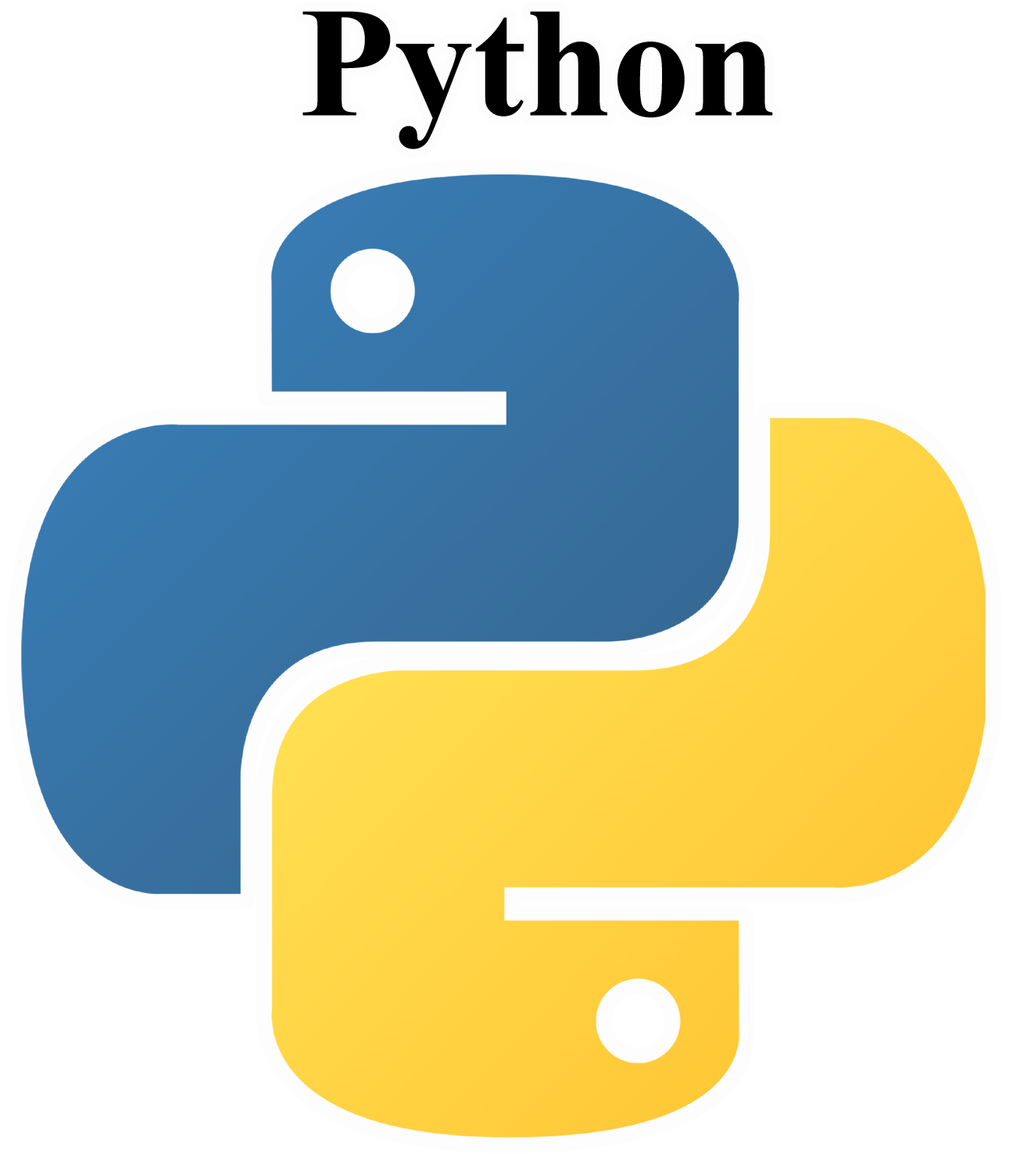
<style>
.page{position:relative;width:1020px;height:1169px;background:#ffffff}
.page>*{position:absolute;margin:0}
.t1{font:156.3px "TimesNewRomanPS-BoldMT";color:#000000}
</style>
<div class="page">
<p class="t1" style="left:303px;top:11px;width:470px;height:138px">Python</p>
</div>
